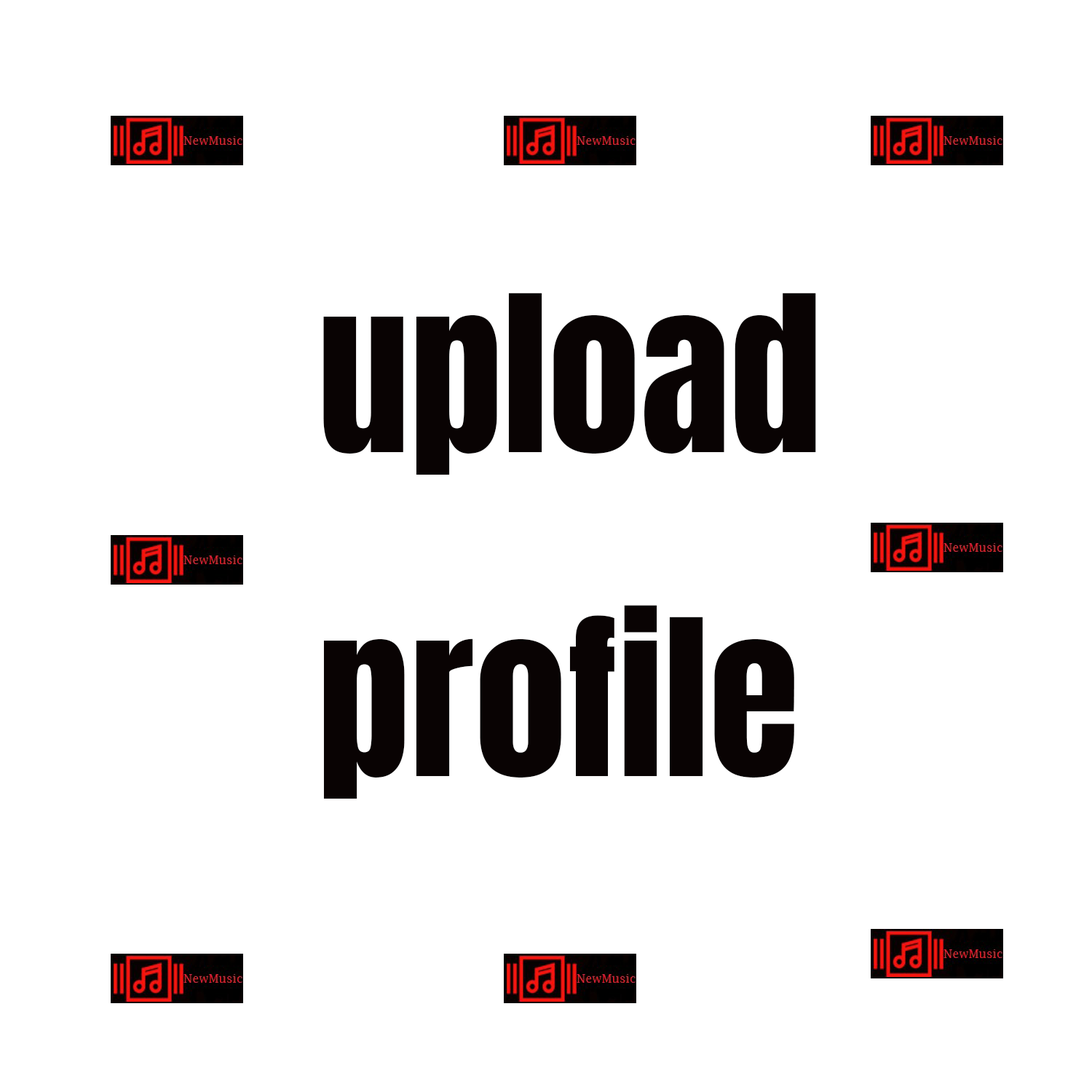
<style>
.page{position:relative;width:1092px;height:1092px;background:#ffffff}
.page>*{position:absolute;margin:0}
.t1{font:185px "Anton-Regular";color:#090303}
</style>
<div class="page">
<p class="t1" style="left:323px;top:293px;width:493px;height:506px">upload<br>profile</p>
</div>
